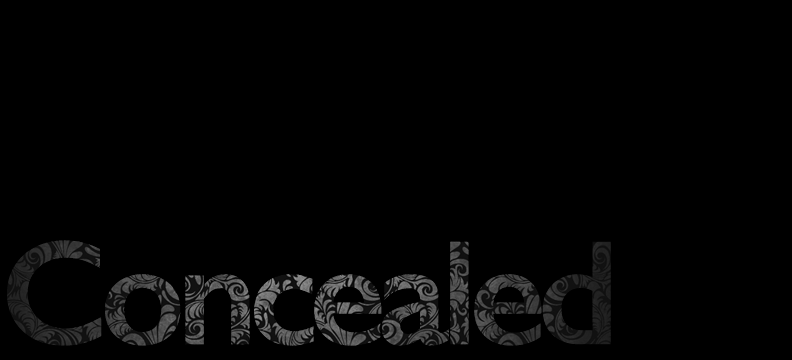
<style>
.page{position:relative;width:792px;height:360px;background:#000000}
.page>*{position:absolute;margin:0}
.t1{font:150px "GillSans-SemiBold";letter-spacing:-0.06em}
</style>
<div class="page">
<p class="t1" style="left:7px;top:240px;width:604px;height:106px">Concealed</p>
</div>
